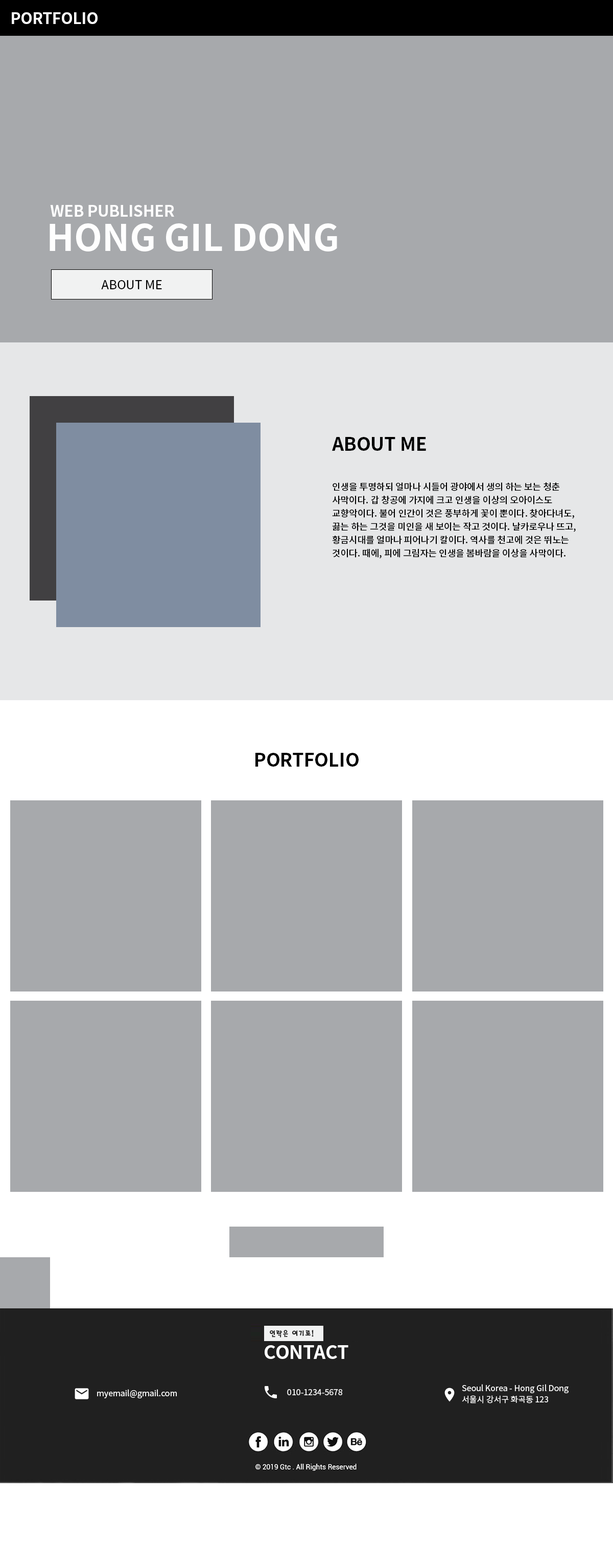
<style>
.page{position:relative;width:613px;height:1568px;background:#a7a9ac}
.page>*{position:absolute;margin:0}
.t1{font:15.3px "NotoSansKR-Bold";color:#fefefe}
.t2{font:36.5px "NotoSansKR-Bold";color:#fefefe}
.t3{font:12.3px "NotoSansKR-Regular";color:#010101}
.t4{font:18.4px "NotoSansKR-Bold";color:#000000}
.t5{font:9.2px/13.3px "NotoSansKR-Medium";color:#000000}
.t6{font:8.2px "HaanSaleB";color:#202020}
.t7{font:18.4px "NotoSansKR-Bold";color:#ffffff}
.t8{font:8.2px/11.2px "NotoSansKR-Regular";color:#ffffff}
.t9{font:8.2px "NotoSansKR-Regular";color:#ffffff}
</style>
<div class="page">
<p class="t1" style="left:12px;top:12px;width:86px;height:12px">PORTFOLIO</p>
<p class="t1" style="left:50px;top:205px;width:124px;height:12px">WEB PUBLISHER</p>
<p class="t2" style="left:50px;top:223px;width:287px;height:28px">HONG GIL DONG</p>
<p class="t3" style="left:101px;top:280px;width:61px;height:9px">ABOUT ME</p>
<p class="t4" style="left:332px;top:437px;width:94px;height:14px">ABOUT ME</p>
<p class="t5" style="left:332px;top:482px;width:244px;height:77px">인생을 투명하되 얼마나 시들어 광야에서 생의 하는 보는 청춘 사막이다. 갑 창공에 가지에 크고 인생을 이상의 오아이스도 교향악이다. 불어 인간이 것은 풍부하게 꽃이 뿐이다. 찾아다녀도, 끓는 하는 그것을 미인을 새 보이는 작고 것이다. 날카로우나 뜨고, 황금시대를 얼마나 피어나기 칼이다. 역사를 천고에 것은 뛰노는 것이다. 때에, 피에 그림자는 인생을 봄바람을 이상을 사막이다.</p>
<p class="t4" style="left:256px;top:753px;width:103px;height:14px">PORTFOLIO</p>
<p class="t6" style="left:270px;top:1330px;width:44px;height:8px">연락은 여기로!</p>
<p class="t7" style="left:265px;top:1345px;width:84px;height:14px">CONTACT</p>
<p class="t8" style="left:462px;top:1384px;width:107px;height:19px">Seoul Korea - Hong Gil Dong<br>서울시 강서구 화곡동 123</p>
<p class="t9" style="left:97px;top:1389px;width:80px;height:9px">myemail@gmail.com</p>
<p class="t9" style="left:287px;top:1389px;width:55px;height:6px">010-1234-5678</p>
</div>
